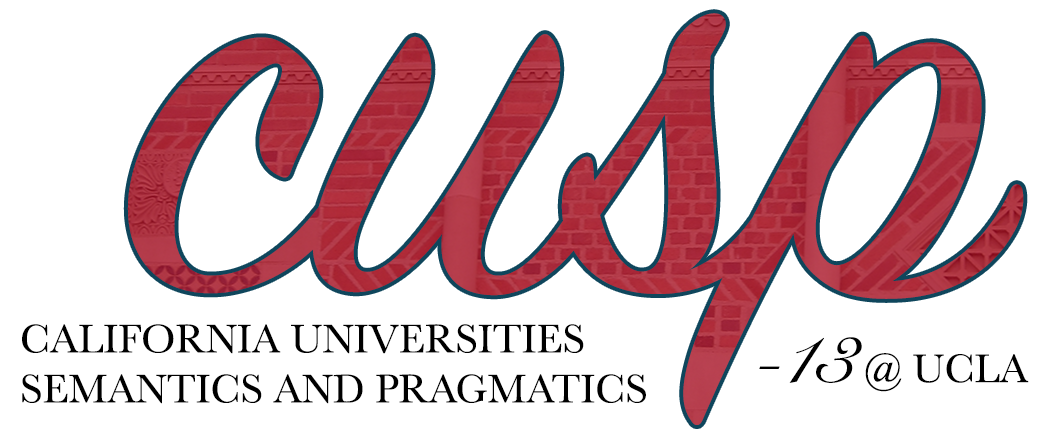
<style>
.page{position:relative;width:1050px;height:438px;background:#ffffff}
.page>*{position:absolute;margin:0}
.t1{font:41.7px "Baskerville";color:#000000}
.t2{font:83.3px "SnellRoundhand";color:#000000}
</style>
<div class="page">
<p class="t1" style="left:22px;top:324px;width:624px;height:80px">CALIFORNIA UNIVERSITIES SEMANTICS AND PRAGMATICS</p>
<p class="t1" style="left:759px;top:337px;width:270px;height:55px"><span class="t2">-13</span> @ UCLA</p>
</div>
